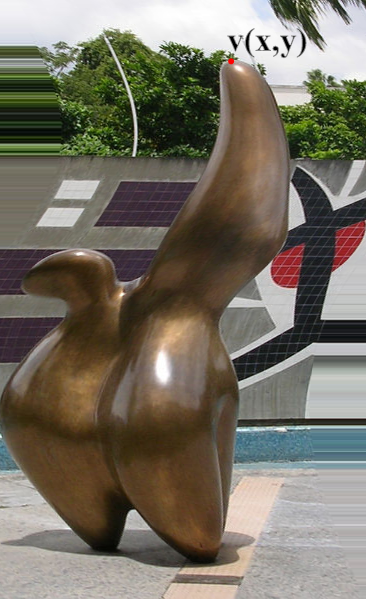
<style>
.page{position:relative;width:366px;height:599px}
.page>*{position:absolute;margin:0}
.t1{font:33.3px "TimesNewRomanPS-BoldMT"}
</style>
<div class="page">
<p class="t1" style="left:227px;top:28px;width:80px;height:31px">v(x,y)</p>
</div>
